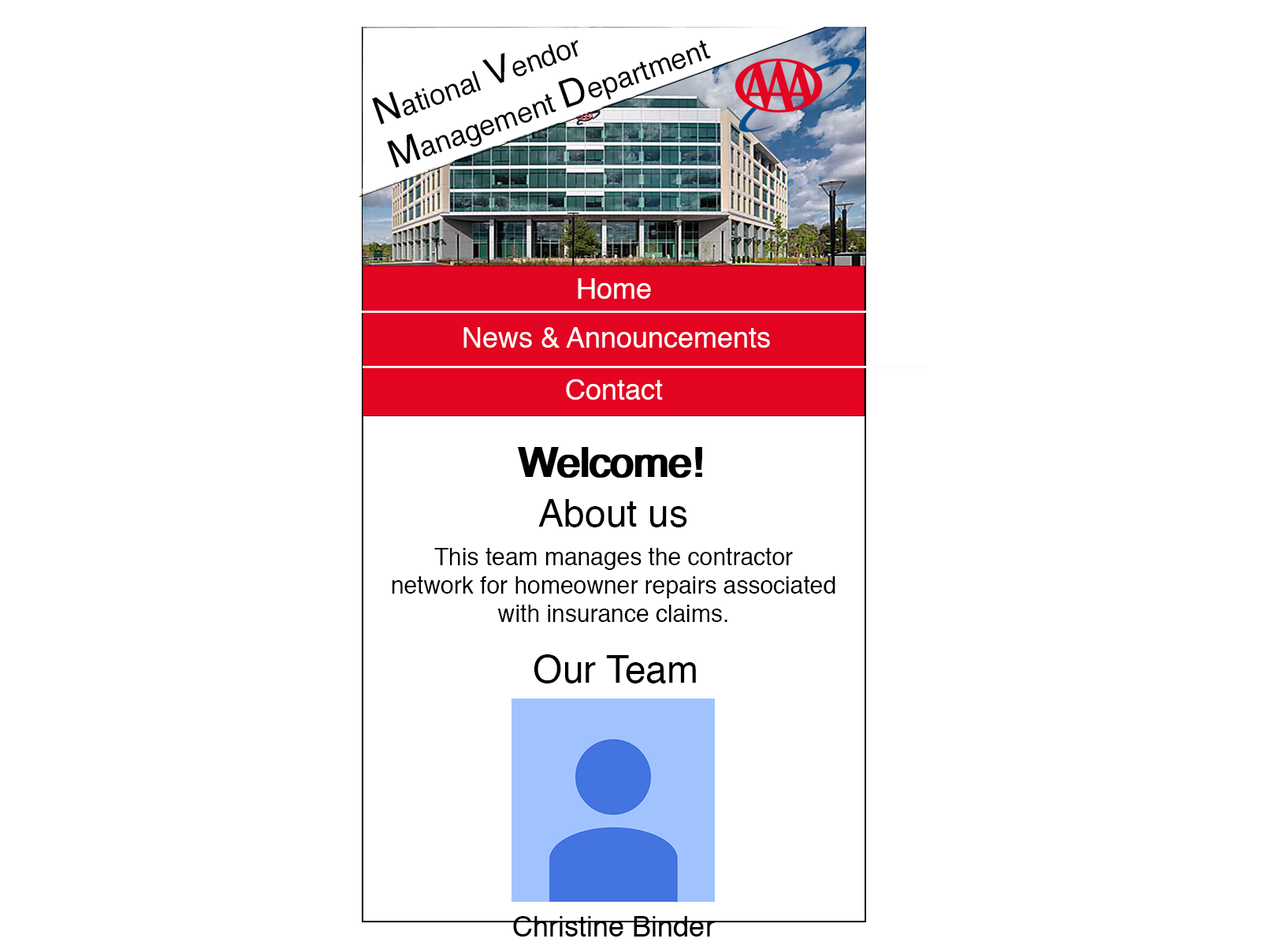
<style>
.page{position:relative;width:1261px;height:946px;background:#ffffff}
.page>*{position:absolute;margin:0}
.t1{font:28.4px "Helvetica";color:#000000}
.t2{font:37.8px "Helvetica";color:#000000}
.t3{font:28.4px "Helvetica";color:#ffffff}
.t4{font:23.6px "Helvetica";color:#000000}
</style>
<div class="page">
<p class="t1" style="left:372px;top:39px;width:339px;height:129px;rotate:-19deg"><span class="t2">N</span>ational <span class="t2">V</span>endor<br><span class="t2">M</span>anagement <span class="t2">D</span>epartment</p>
<p class="t3" style="left:578px;top:278px;width:73px;height:21px">Home</p>
<p class="t3" style="left:463px;top:327px;width:307px;height:21px">News &amp; Announcements</p>
<p class="t3" style="left:566px;top:379px;width:97px;height:21px">Contact</p>
<p class="t2" style="left:538px;top:499px;width:149px;height:28px">About us</p>
<p class="t4" style="left:392px;top:548px;width:443px;height:74px;text-align:center">This team manages the contractor<br> network for homeowner repairs associated <br>with insurance claims.</p>
<p class="t2" style="left:534px;top:654px;width:162px;height:29px">Our Team</p>
<p class="t1" style="left:513px;top:916px;width:202px;height:20px">Christine Binder</p>
</div>
